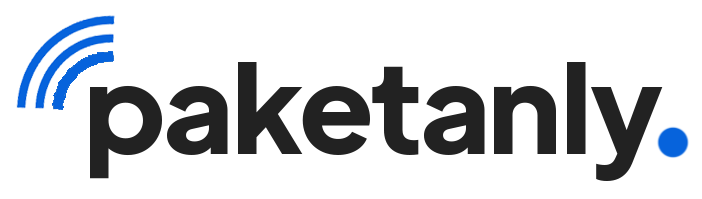
<style>
.page{position:relative;width:702px;height:199px;background:#ffffff}
.page>*{position:absolute;margin:0}
.t1{font:123.3px "PlusJakartaDisplay-Bold";color:#222222}
</style>
<div class="page">
<p class="t1" style="left:90px;top:62px;width:573px;height:119px">paketanly</p>
</div>
